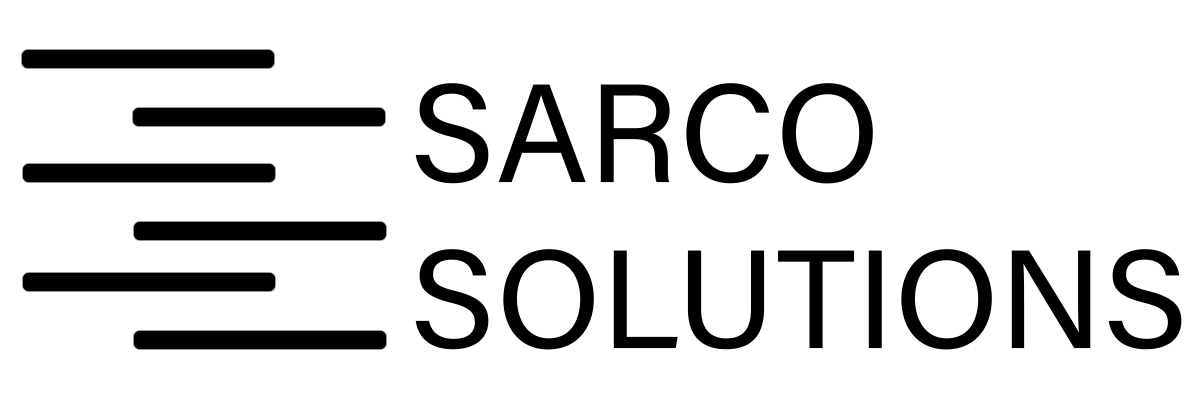
<style>
.page{position:relative;width:1202px;height:400px;background:#ffffff}
.page>*{position:absolute;margin:0}
.t1{font:140px "AcuminConcept-Regular";color:#000000}
</style>
<div class="page">
<p class="t1" style="left:415px;top:83px;width:458px;height:101px">SARCO</p>
<p class="t1" style="left:415px;top:249px;width:767px;height:101px">SOLUTIONS</p>
</div>
